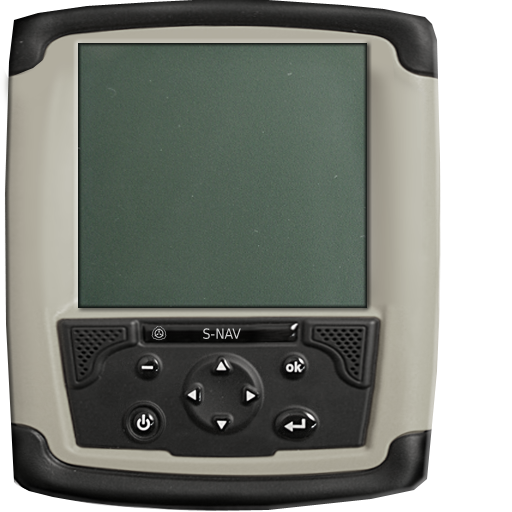
<style>
.page{position:relative;width:512px;height:512px}
.page>*{position:absolute;margin:0}
.t1{font:14px "DejaVuSansCondensed";color:#cecece}
</style>
<div class="page">
<p class="t1" style="left:203px;top:328px;width:38px;height:11px">S-NAV</p>
</div>
